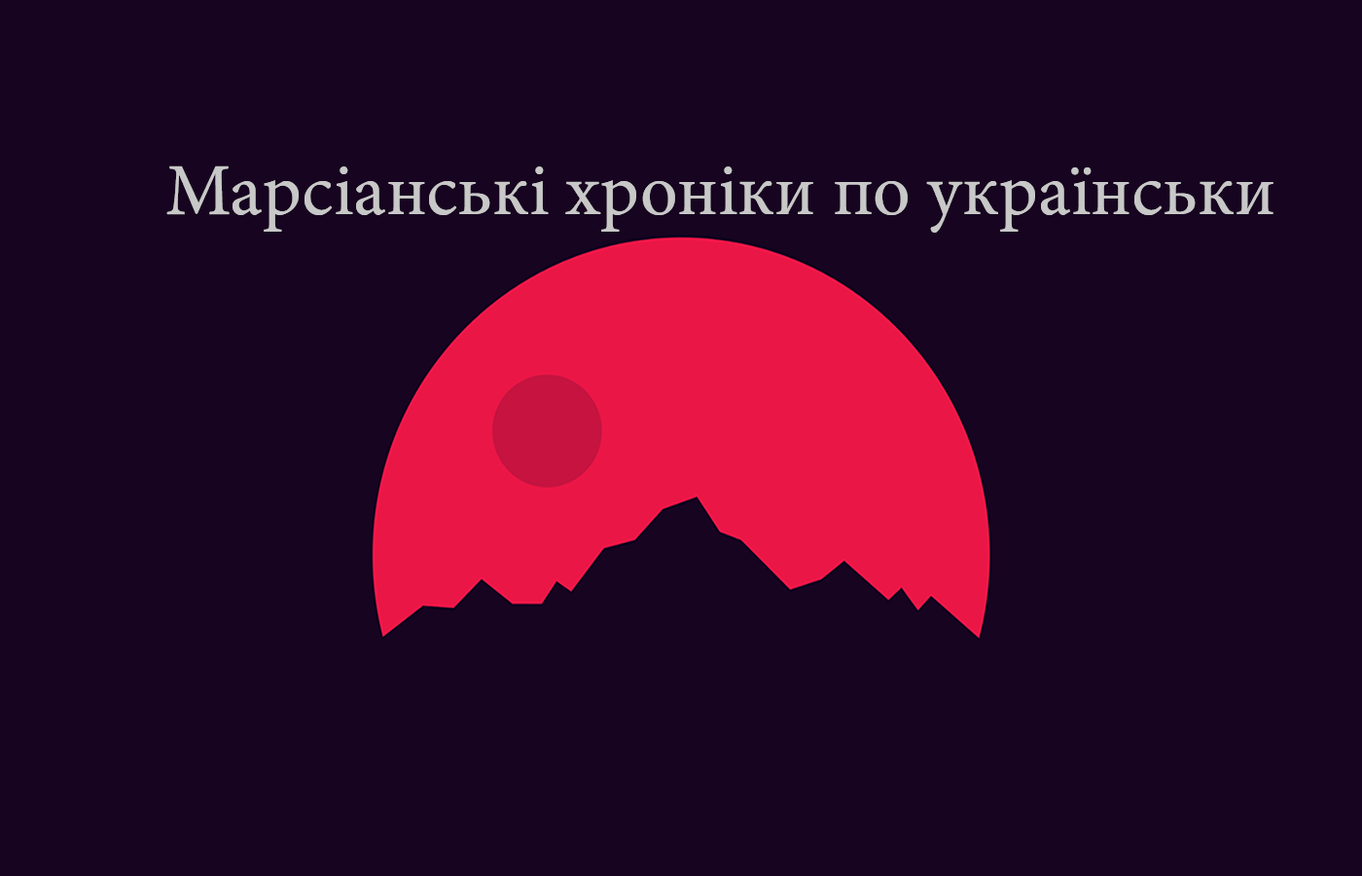
<style>
.page{position:relative;width:1362px;height:876px;background:#170420}
.page>*{position:absolute;margin:0}
.t1{font:73.9px "MinionPro-Regular";color:#c8c8c8}
</style>
<div class="page">
<p class="t1" style="left:166px;top:165px;width:1107px;height:68px">Марсіанські хроніки по українськи</p>
</div>
